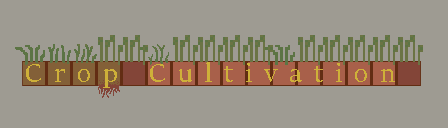
<style>
.page{position:relative;width:448px;height:128px;background:#9e9b92}
.page>*{position:absolute;margin:0}
.t1{font:30px "SitkaBanner";letter-spacing:0.4em;color:#ceb039}
</style>
<div class="page">
<p class="t1" style="left:26px;top:62px;width:369px;height:26px">Crop Cultivation</p>
</div>
